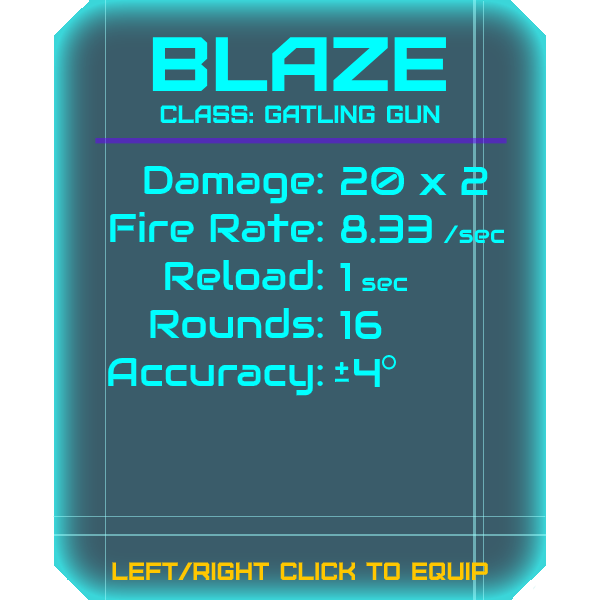
<style>
.page{position:relative;width:600px;height:600px;background:#3a5c6a}
.page>*{position:absolute;margin:0}
.t1{font:76.8px "Furore";color:#00ffff;scale:1.13 1}
.t2{font:25px "Furore";color:#00ffff}
.t3{font:40px "Audiowide-Regular";color:#00ffff}
.t4{font:25px "Audiowide-Regular";color:#00ffff}
.t5{font:25px "Furore";color:#ffc700}
</style>
<div class="page">
<p class="t1" style="left:152px;top:37px;width:294px;height:54px">blaze</p>
<p class="t2" style="left:160px;top:105px;width:280px;height:18px">Class: gatling gun</p>
<p class="t3" style="left:108px;top:165px;width:215px;height:231px;text-align:right">Damage:<br>Fire Rate:<br>Reload:<br>Rounds:<br>Accuracy:</p>
<p class="t3" style="left:340px;top:166px;width:165px;height:221px">20 x 2<br>8.33 <span class="t4">/sec<br></span>1 <span class="t4">sec<br></span>16<br> 4</p>
<p class="t5" style="left:112px;top:562px;width:376px;height:18px">left/right click to equip</p>
</div>
